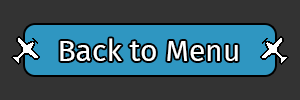
<style>
.page{position:relative;width:300px;height:100px;background:#333333}
.page>*{position:absolute;margin:0}
.t1{font:30px "FiraSans-Regular";color:#ffffff}
</style>
<div class="page">
<p class="t1" style="left:60px;top:38px;width:178px;height:23px">Back to Menu</p>
</div>
